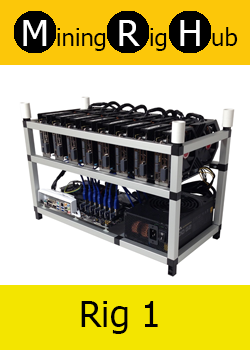
<style>
.page{position:relative;width:250px;height:350px;background:#ffffff}
.page>*{position:absolute;margin:0}
.t1{font:36px "Tahoma";color:#ffffff}
.t2{font:24px "Tahoma";color:#000000}
.t3{font:36px "Tahoma";color:#000000}
</style>
<div class="page">
<p class="t1" style="left:23px;top:20px;width:24px;height:26px">M</p>
<p class="t2" style="left:57px;top:28px;width:49px;height:23px">ining</p>
<p class="t1" style="left:119px;top:20px;width:21px;height:26px">R</p>
<p class="t2" style="left:150px;top:28px;width:17px;height:23px">ig</p>
<p class="t1" style="left:180px;top:20px;width:20px;height:26px">H</p>
<p class="t2" style="left:212px;top:27px;width:26px;height:19px">ub</p>
<p class="t3" style="left:81px;top:301px;width:77px;height:33px">Rig 1</p>
</div>
